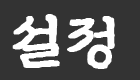
<style>
.page{position:relative;width:140px;height:80px;background:#333333}
.page>*{position:absolute;margin:0}
.t1{font:60px "ChosunCentennial";letter-spacing:-0.01em;color:#ffffff;font-weight:bold}
</style>
<div class="page">
<p class="t1" style="left:12px;top:14px;width:103px;height:55px">설정</p>
</div>
